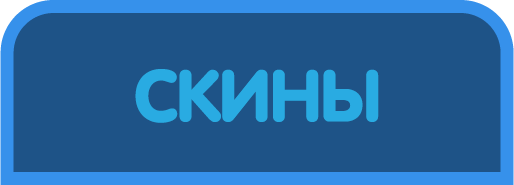
<style>
.page{position:relative;width:514px;height:185px;background:#1e5387}
.page>*{position:absolute;margin:0}
.t1{font:72px "VAGWorld-Bold";color:#29abe2}
</style>
<div class="page">
<p class="t1" style="left:135px;top:69px;width:244px;height:54px">СКИНЫ</p>
</div>
